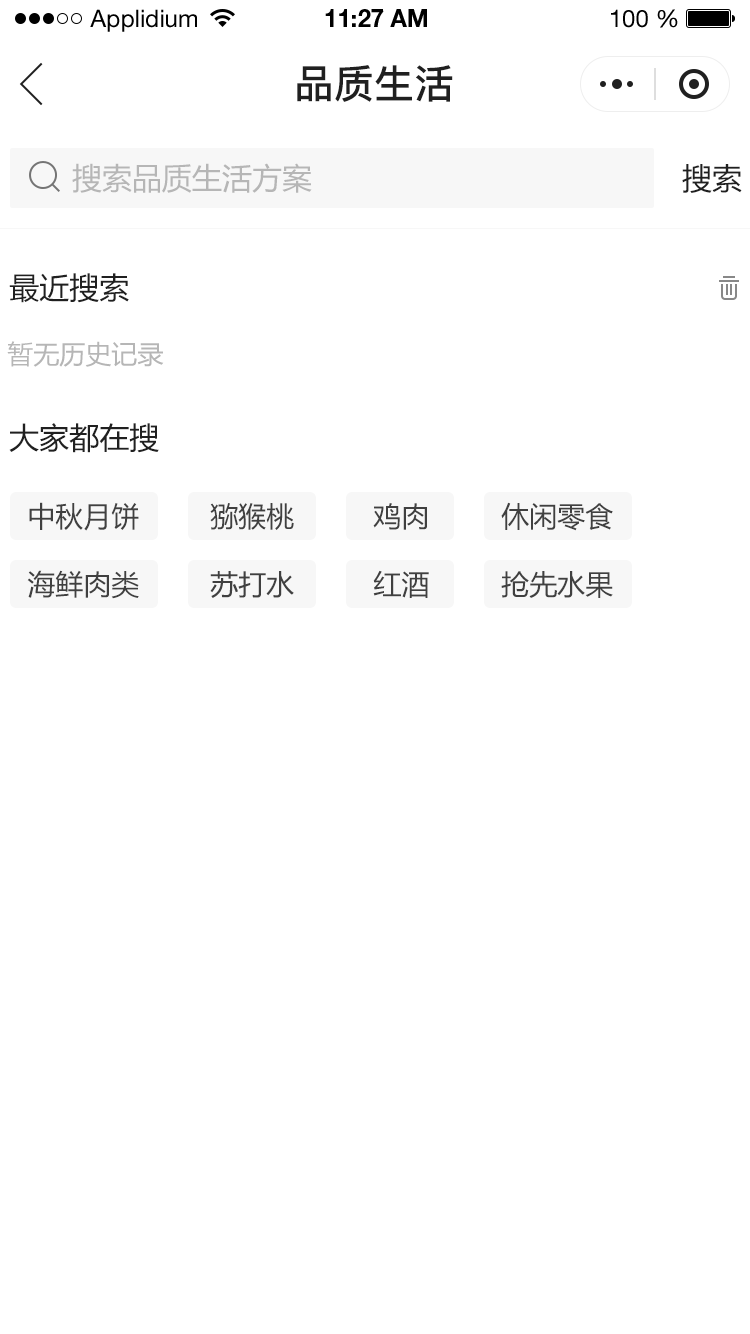
<style>
.page{position:relative;width:750px;height:1334px;background:#ffffff}
.page>*{position:absolute;margin:0}
.t1{font:24px "HelveticaNeueLTStd-Roman";color:#000000}
.t2{font:24px "HelveticaNeueLTStd-Bd";color:#000000}
.t3{font:40px "PingFang-SC-Bold";color:#202020;text-transform:uppercase}
.t4{font:30px "MicrosoftYaHei";color:#b6b6b6;text-transform:uppercase}
.t5{font:30px "MicrosoftYaHei";color:#202020;text-transform:uppercase}
.t6{font:26px "MicrosoftYaHei";color:#b6b6b6;text-transform:uppercase}
.t7{font:28px "MicrosoftYaHei";color:#404040;text-transform:uppercase}
</style>
<div class="page">
<p class="t1" style="left:90px;top:9px;width:107px;height:23px">Applidium</p>
<p class="t2" style="left:325px;top:9px;width:102px;height:18px">11:27 AM</p>
<p class="t1" style="left:611px;top:9px;width:67px;height:19px">100 %</p>
<p class="t3" style="left:297px;top:65px;width:156px;height:37px">品质生活</p>
<p class="t4" style="left:72px;top:163px;width:240px;height:30px">搜索品质生活方案</p>
<p class="t5" style="left:682px;top:164px;width:60px;height:29px">搜索</p>
<p class="t5" style="left:9px;top:273px;width:120px;height:30px">最近搜索</p>
<p class="t6" style="left:7px;top:341px;width:157px;height:26px">暂无历史记录</p>
<p class="t5" style="left:9px;top:423px;width:150px;height:30px">大家都在搜</p>
<p class="t7" style="left:29px;top:502px;width:110px;height:29px">中秋月饼</p>
<p class="t7" style="left:210px;top:503px;width:84px;height:27px">猕猴桃</p>
<p class="t7" style="left:373px;top:503px;width:54px;height:27px">鸡肉</p>
<p class="t7" style="left:501px;top:502px;width:112px;height:29px">休闲零食</p>
<p class="t7" style="left:27px;top:570px;width:112px;height:29px">海鲜肉类</p>
<p class="t7" style="left:210px;top:571px;width:84px;height:27px">苏打水</p>
<p class="t7" style="left:373px;top:570px;width:56px;height:28px">红酒</p>
<p class="t7" style="left:501px;top:571px;width:112px;height:27px">抢先水果</p>
</div>
